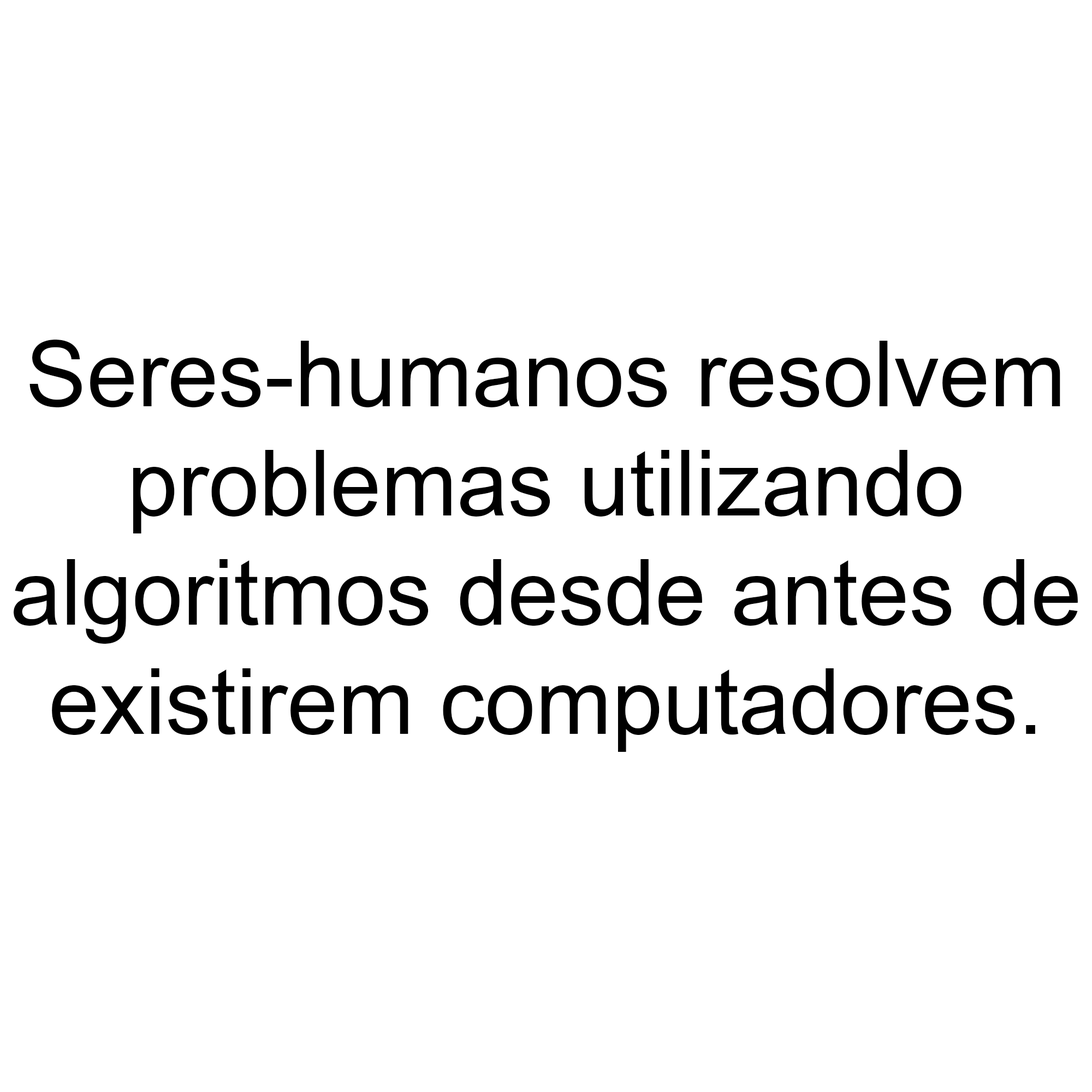
<style>
.page{position:relative;width:1092px;height:1092px;background:#ffffff}
.page>*{position:absolute;margin:0}
.t1{font:91px "ArialMT";color:#000000}
</style>
<div class="page">
<p class="t1" style="left:14px;top:340px;width:1064px;height:412px;text-align:center">Seres-humanos resolvem<br>problemas utilizando<br>algoritmos desde antes de<br>existirem computadores.</p>
</div>
